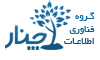
<style>
.page{position:relative;width:100px;height:60px;background:#ffffff}
.page>*{position:absolute;margin:0}
.t1{font:10.4px "BYekan";color:#125f8d}
</style>
<div class="page">
<p class="t1" style="left:64px;top:12px;width:31px;height:32px">گـروه<br>فناوری<br>اطلاعـات</p>
</div>
